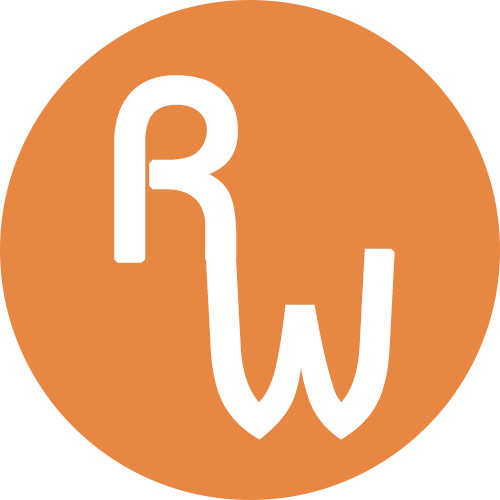
<style>
.page{position:relative;width:500px;height:500px;background:#e88741}
.page>*{position:absolute;margin:0}
.t1{font:254px "Baumans-Regular";color:#ffffff;font-weight:bold}
</style>
<div class="page">
<p class="t1" style="left:114px;top:75px;width:124px;height:188px">R</p>
<p class="t1" style="left:205px;top:248px;width:190px;height:192px">W</p>
</div>
